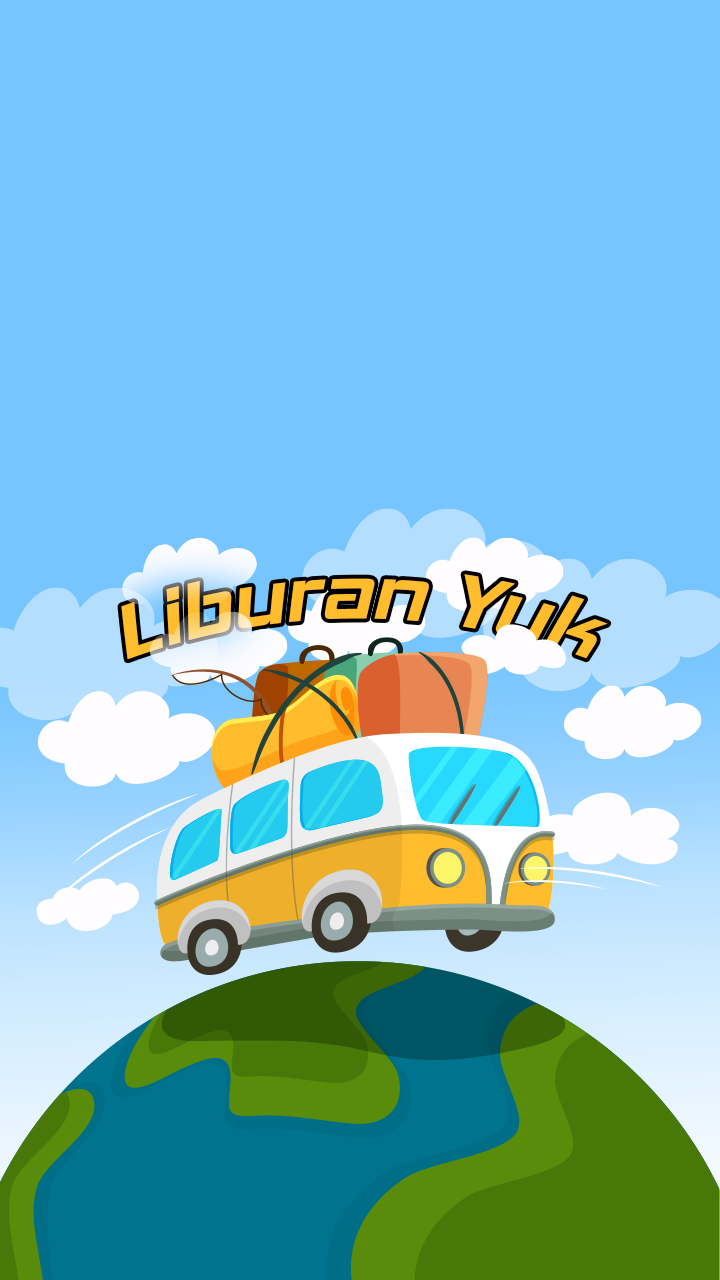
<style>
.page{position:relative;width:720px;height:1280px;background:#77c5ff}
.page>*{position:absolute;margin:0}
.t1{font:36.6px "HemiHeadRg-BoldItalic";color:#ffbd2d}
</style>
<div class="page">
<p class="t1" style="left:121px;top:574px;width:487px;height:86px">Liburan Yuk</p>
</div>
